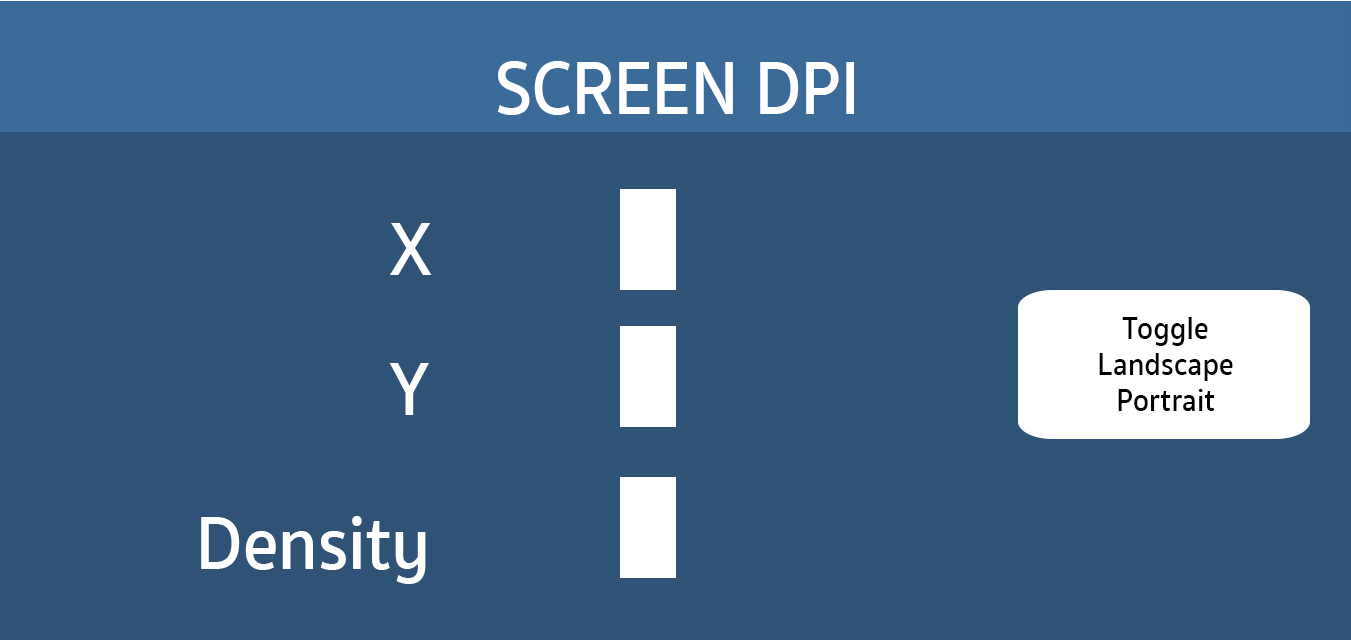
<style>
.page{position:relative;width:1351px;height:640px;background:#2e5376}
.page>*{position:absolute;margin:0}
.t1{font:76.6px "SukhumvitSet-SemiBold";color:#ffffff;scale:0.91 1}
.t2{font:32.2px/36px "SukhumvitSet-SemiBold";color:#010101;scale:0.91 1}
</style>
<div class="page">
<p class="t1" style="left:497px;top:61px;width:357px;height:54px">SCREEN DPI</p>
<p class="t1" style="left:390px;top:223px;width:42px;height:52px">X</p>
<p class="t2" style="left:1099px;top:317px;width:134px;height:94px;text-align:center">Toggle<br>Landscape<br>Portrait</p>
<p class="t1" style="left:389px;top:363px;width:40px;height:52px">Y</p>
<p class="t1" style="left:201px;top:516px;width:225px;height:68px">Density</p>
</div>
